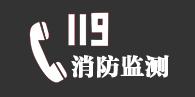
<style>
.page{position:relative;width:195px;height:97px;background:#333333}
.page>*{position:absolute;margin:0}
.t1{font:24px "FZFYSJW--GB1-0";color:#ffffff;font-weight:bold}
</style>
<div class="page">
<p class="t1" style="left:71px;top:55px;width:98px;height:23px">消防监测</p>
</div>
